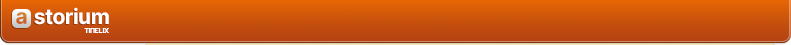
<style>
.page{position:relative;width:791px;height:45px}
.page>*{position:absolute;margin:0}
.t1{font:21px "Inter-Bold";letter-spacing:-0.075em;color:#cf6f2a}
.t2{font:21px "Inter-Bold";letter-spacing:-0.025em;color:#ffffff}
.t3{font:7px "AA-Akashi";letter-spacing:-0.025em;color:#ffffff}
</style>
<div class="page">
<p class="t1" style="left:16px;top:12px;width:11px;height:12px">a</p>
<p class="t2" style="left:34px;top:7px;width:75px;height:18px">storium</p>
<p class="t3" style="left:84px;top:28px;width:25px;height:5px">TINELIX</p>
</div>
